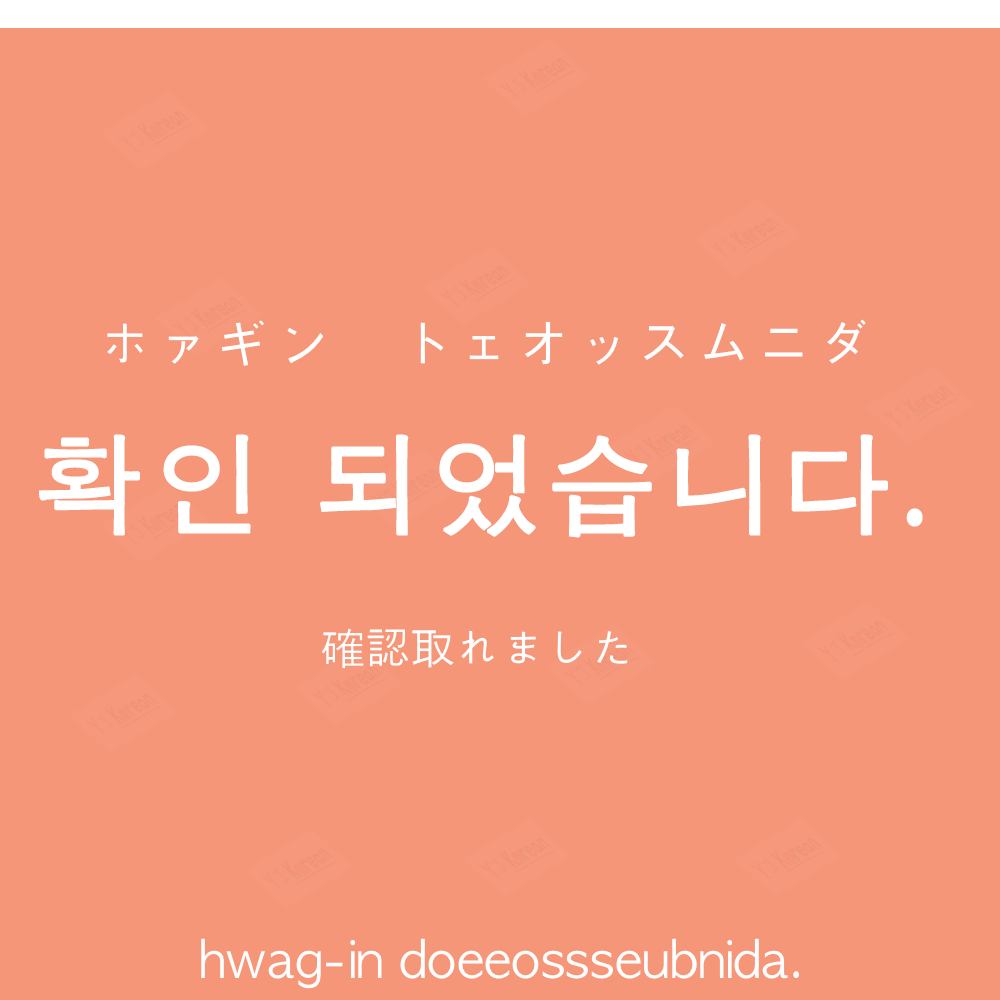
<style>
.page{position:relative;width:1000px;height:1000px;background:#f69679}
.page>*{position:absolute;margin:0}
.t1{font:60px "AppleGothic";color:#ffffff}
.t2{font:110px "AppleGothic";letter-spacing:0.04em;color:#ffffff;font-weight:bold}
.t3{font:45px "AppleGothic";color:#ffffff}
.t4{font:50px "AppleGothic";color:#ffffff}
</style>
<div class="page">
<p class="t1" style="left:107px;top:319px;width:759px;height:47px">ホァギン　トェオッスムニダ</p>
<p class="t2" style="left:39px;top:434px;width:884px;height:104px">확인 되었습니다.</p>
<p class="t3" style="left:321px;top:628px;width:307px;height:41px">確認取れました</p>
<p class="t4" style="left:201px;top:938px;width:598px;height:51px">hwag-in doeeossseubnida.</p>
</div>
